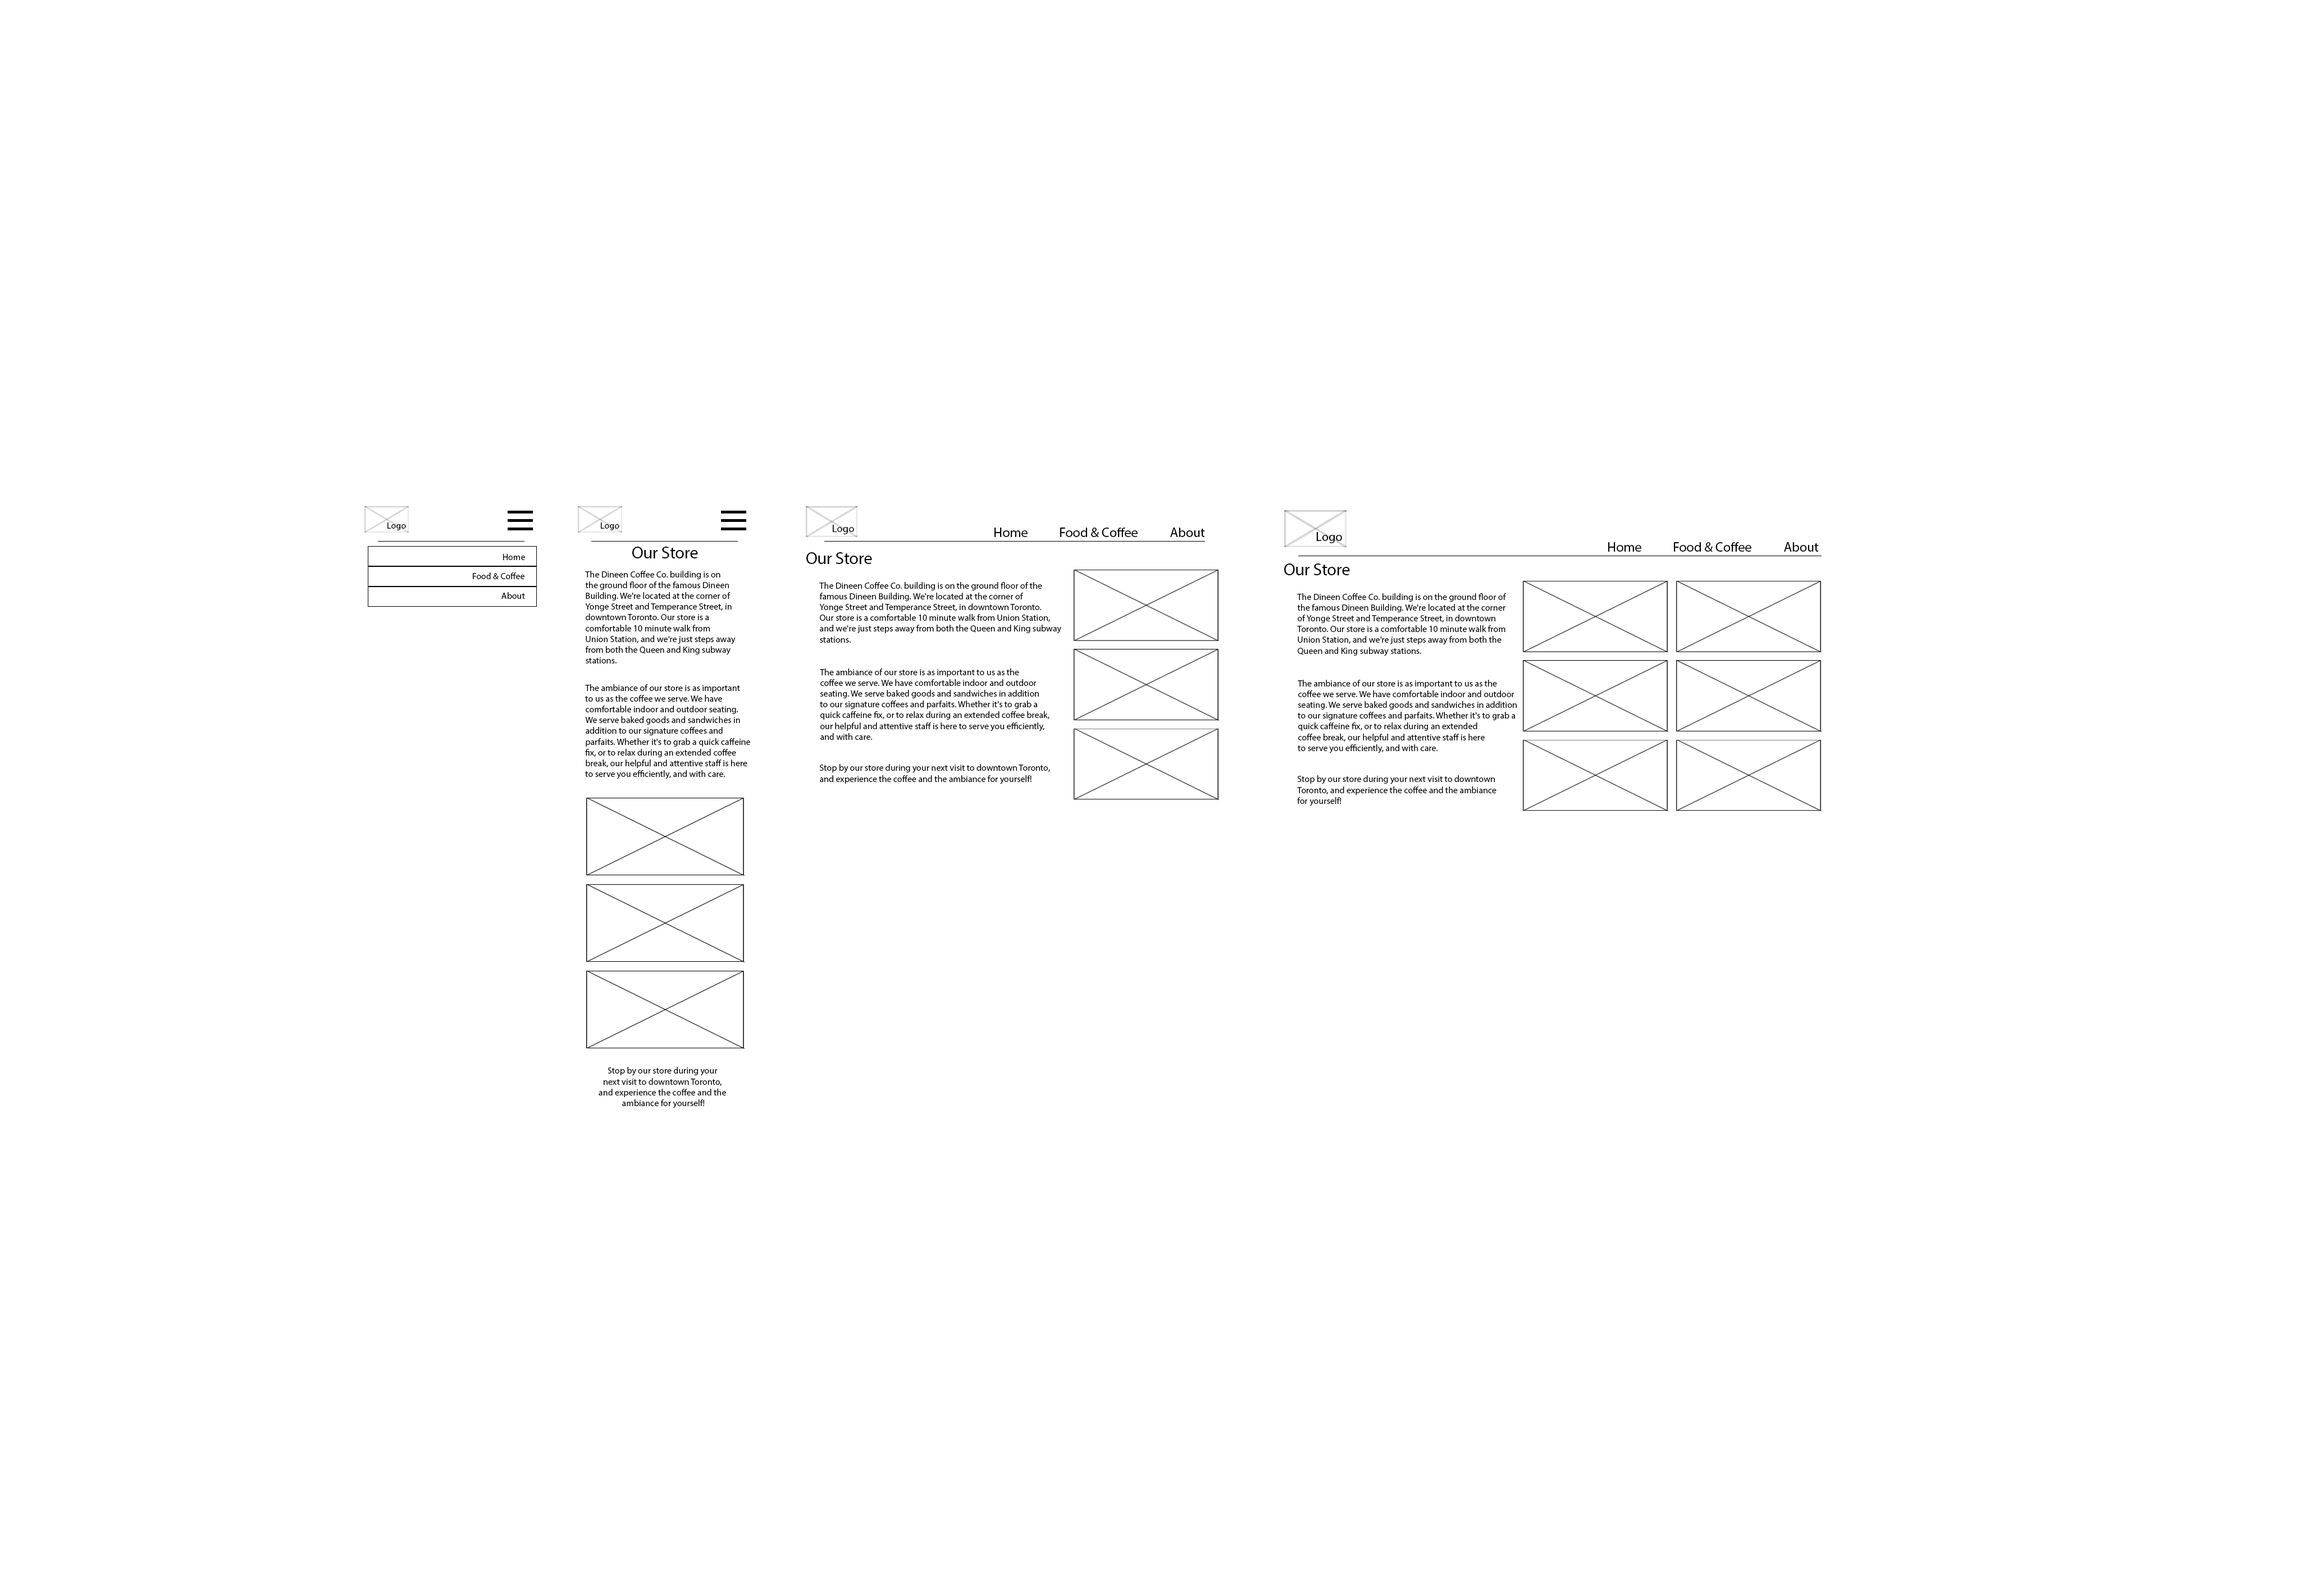
<style>
.page{position:relative;width:2300px;height:1582px;background:#ffffff}
.page>*{position:absolute;margin:0}
.t1{font:9px "MyriadPro-Regular";color:#000000}
.t2{font:10.5px "MyriadPro-Regular";color:#000000}
.t3{font:13.5px "MyriadPro-Regular";color:#000000}
.t4{font:12.6px "MyriadPro-Regular";color:#000000}
.t5{font:16.8px "MyriadPro-Regular";color:#000000}
</style>
<div class="page">
<p class="t1" style="left:388px;top:522px;width:18px;height:8px">Logo</p>
<p class="t1" style="left:601px;top:522px;width:18px;height:8px">Logo</p>
<p class="t2" style="left:833px;top:525px;width:21px;height:9px">Logo</p>
<p class="t3" style="left:995px;top:527px;width:33px;height:10px">Home</p>
<p class="t3" style="left:1060px;top:527px;width:78px;height:10px">Food &amp; Coffee</p>
<p class="t3" style="left:1170px;top:527px;width:35px;height:10px">About</p>
<p class="t4" style="left:1316px;top:532px;width:26px;height:11px">Logo</p>
<p class="t3" style="left:1608px;top:542px;width:34px;height:10px">Home</p>
<p class="t3" style="left:1674px;top:542px;width:78px;height:10px">Food &amp; Coffee</p>
<p class="t3" style="left:1784px;top:542px;width:35px;height:10px">About</p>
<p class="t1" style="left:503px;top:554px;width:22px;height:6px">Home</p>
<p class="t5" style="left:632px;top:546px;width:66px;height:12px">Our Store</p>
<p class="t5" style="left:806px;top:552px;width:66px;height:12px">Our Store</p>
<p class="t5" style="left:1284px;top:563px;width:66px;height:12px">Our Store</p>
<p class="t1" style="left:473px;top:572px;width:52px;height:7px">Food &amp; Coffee</p>
<p class="t1" style="left:585px;top:571px;width:151px;height:92px">The Dineen Coffee Co. building is on <br>the ground floor of the famous Dineen <br>Building. We're located at the corner of <br>Yonge Street and Temperance Street, in <br>downtown Toronto. Our store is a <br>comfortable 10 minute walk from <br>Union Station, and we're just steps away <br>from both the Queen and King subway <br>stations.</p>
<p class="t1" style="left:819px;top:582px;width:242px;height:60px">The Dineen Coffee Co. building is on the ground floor of the <br>famous Dineen Building. We're located at the corner of <br>Yonge Street and Temperance Street, in downtown Toronto. <br>Our store is a comfortable 10 minute walk from Union Station, <br>and we're just steps away from both the Queen and King subway <br>stations.</p>
<p class="t1" style="left:502px;top:592px;width:23px;height:7px">About</p>
<p class="t1" style="left:1297px;top:593px;width:210px;height:63px">The Dineen Coffee Co. building is on the ground floor of <br>the famous Dineen Building. We're located at the corner <br>of Yonge Street and Temperance Street, in downtown <br>Toronto. Our store is a comfortable 10 minute walk from <br>Union Station, and we're just steps away from both the <br>Queen and King subway stations.</p>
<p class="t1" style="left:820px;top:668px;width:230px;height:72px">The ambiance of our store is as important to us as the <br>coffee we serve. We have comfortable indoor and outdoor <br>seating. We serve baked goods and sandwiches in addition <br>to our signature coffees and parfaits. Whether it's to grab a <br>quick caffeine fix, or to relax during an extended coffee break, <br>our helpful and attentive staff is here to serve you efficiently, <br>and with care.</p>
<p class="t1" style="left:585px;top:684px;width:165px;height:95px">The ambiance of our store is as important <br>to us as the coffee we serve. We have <br>comfortable indoor and outdoor seating. <br>We serve baked goods and sandwiches in <br>addition to our signature coffees and <br>parfaits. Whether it's to grab a quick caffeine <br>fix, or to relax during an extended coffee <br>break, our helpful and attentive staff is here <br>to serve you efficiently, and with care.</p>
<p class="t1" style="left:1298px;top:680px;width:219px;height:73px">The ambiance of our store is as important to us as the <br>coffee we serve. We have comfortable indoor and outdoor <br>seating. We serve baked goods and sandwiches in addition <br>to our signature coffees and parfaits. Whether it's to grab a <br>quick caffeine fix, or to relax during an extended <br>coffee break, our helpful and attentive staff is here <br>to serve you efficiently, and with care.</p>
<p class="t1" style="left:819px;top:764px;width:231px;height:20px">Stop by our store during your next visit to downtown Toronto, <br>and experience the coffee and the ambiance for yourself!</p>
<p class="t1" style="left:1297px;top:775px;width:200px;height:31px">Stop by our store during your next visit to downtown <br>Toronto, and experience the coffee and the ambiance <br>for yourself!</p>
<p class="t1" style="left:599px;top:1067px;width:127px;height:41px;text-align:center">Stop by our store during your <br>next visit to downtown Toronto, <br>and experience the coffee and the <br>ambiance for yourself!</p>
</div>
